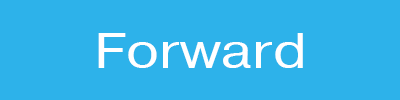
<style>
.page{position:relative;width:400px;height:100px;background:#2db2ea}
.page>*{position:absolute;margin:0}
.t1{font:48px "Helvetica";color:#ffffff;scale:1.2 1}
</style>
<div class="page">
<p class="t1" style="left:98px;top:33px;width:205px;height:35px">Forward</p>
</div>
